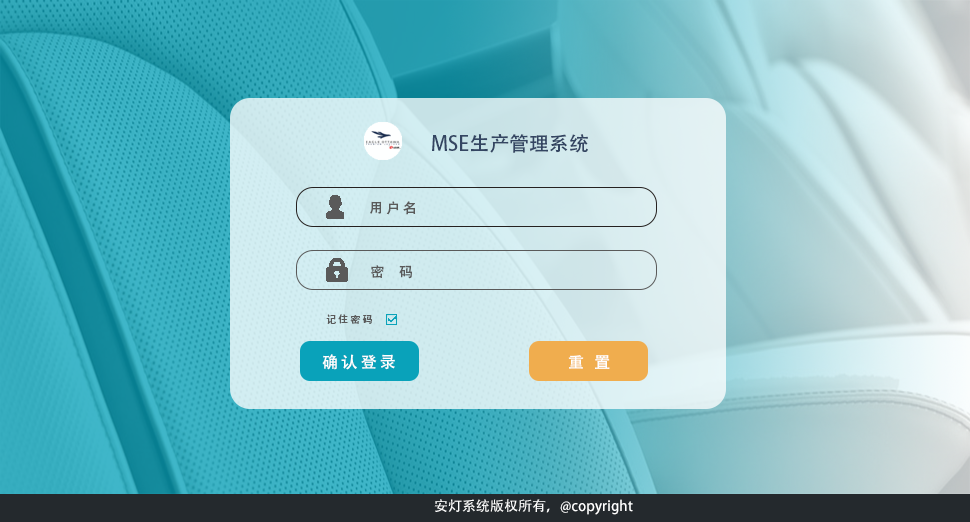
<style>
.page{position:relative;width:970px;height:522px}
.page>*{position:absolute;margin:0}
.t1{font:20px "AdobeHeitiStd-Regular";color:#344562}
.t2{font:14px "AdobeHeitiStd-Regular";letter-spacing:0.2em;color:#5a5a5a}
.t3{font:9.9px "AdobeHeitiStd-Regular";letter-spacing:0.2em;color:#5a5a5a}
.t4{font:16px "AdobeHeitiStd-Regular";letter-spacing:0.2em;color:#ffffff}
.t5{font:14px "AdobeHeitiStd-Regular";color:#ffffff}
</style>
<div class="page">
<p class="t1" style="left:432px;top:134px;width:156px;height:19px">MSE生产管理系统</p>
<p class="t2" style="left:370px;top:201px;width:46px;height:14px">用户名</p>
<p class="t2" style="left:371px;top:265px;width:41px;height:14px">密  码</p>
<p class="t3" style="left:326px;top:314px;width:46px;height:10px">记住密码</p>
<p class="t4" style="left:322px;top:354px;width:73px;height:16px">确认登录</p>
<p class="t4" style="left:568px;top:355px;width:42px;height:14px">重 置</p>
<p class="t5" style="left:434px;top:499px;width:199px;height:16px">安灯系统版权所有，@copyright</p>
</div>
